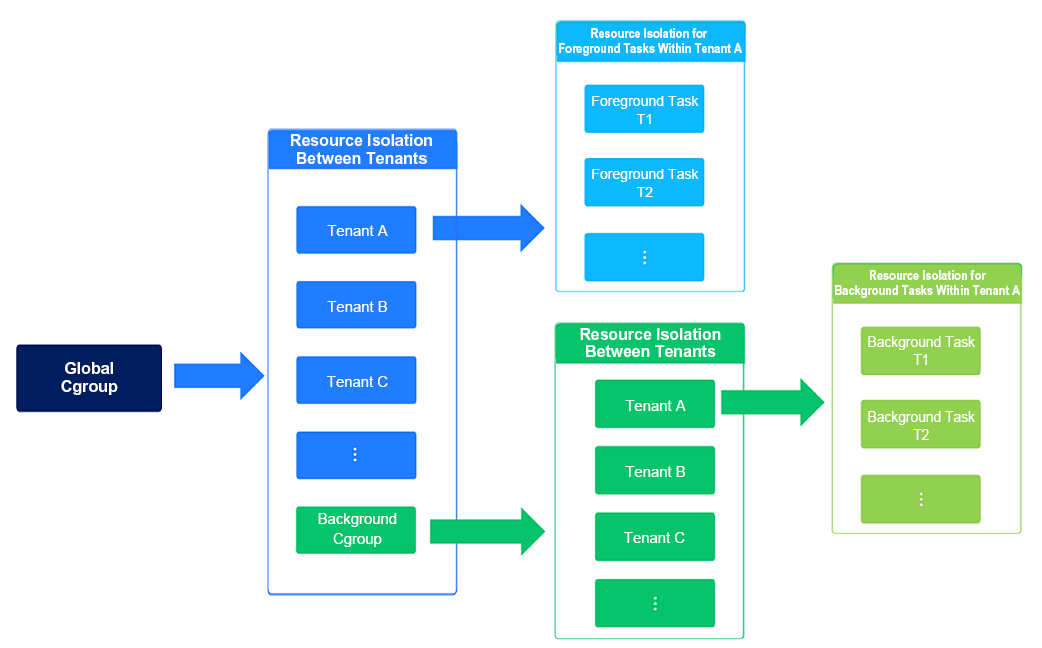
<style>
.page{position:relative;width:1042px;height:648px;background:#ffffff}
.page>*{position:absolute;margin:0}
.t1{font:13.4px/14.8px "Arial-BoldMT";color:#ffffff;scale:0.83 1}
.t2{font:14.1px/17.2px "ArialMT";color:#ffffff}
.t3{font:16px/17.7px "Arial-BoldMT";color:#ffffff}
.t4{font:14.9px "ArialMT";color:#ffffff}
.t5{font:15.9px/17.6px "Arial-BoldMT";color:#ffffff}
.t6{font:14.9px/18.2px "ArialMT";color:#ffffff;scale:0.93 1}
.t7{font:16px/18px "Arial-BoldMT";color:#ffffff}
.t8{font:14.9px/20.4px "ArialMT";color:#ffffff}
</style>
<div class="page">
<p class="t1" style="left:559px;top:28px;width:183px;height:28px;text-align:center">Resource Isolation for <br>Foreground Tasks Within Tenant A</p>
<p class="t2" style="left:592px;top:96px;width:107px;height:28px;text-align:center">Foreground Task<br>T1</p>
<p class="t3" style="left:291px;top:134px;width:141px;height:30px;text-align:center">Resource Isolation<br>Between Tenants</p>
<p class="t2" style="left:592px;top:169px;width:107px;height:28px;text-align:center">Foreground Task<br>T2</p>
<p class="t4" style="left:327px;top:225px;width:61px;height:11px">Tenant A</p>
<p class="t1" style="left:835px;top:270px;width:185px;height:28px;text-align:center">Resource Isolation for<br>Background Tasks Within Tenant A</p>
<p class="t4" style="left:327px;top:301px;width:60px;height:11px">Tenant B</p>
<p class="t5" style="left:580px;top:328px;width:141px;height:29px;text-align:center">Resource Isolation<br>Between Tenants</p>
<p class="t6" style="left:868px;top:336px;width:107px;height:29px;text-align:center">Background Task<br>T1</p>
<p class="t7" style="left:61px;top:362px;width:57px;height:33px;text-align:center">Global<br>Cgroup</p>
<p class="t4" style="left:327px;top:376px;width:61px;height:11px">Tenant C</p>
<p class="t4" style="left:625px;top:400px;width:61px;height:11px">Tenant A</p>
<p class="t6" style="left:868px;top:411px;width:107px;height:29px;text-align:center">Background Task<br>T2</p>
<p class="t4" style="left:625px;top:466px;width:60px;height:11px">Tenant B</p>
<p class="t8" style="left:318px;top:513px;width:79px;height:34px;text-align:center">Background<br>Cgroup</p>
<p class="t4" style="left:624px;top:532px;width:61px;height:11px">Tenant C</p>
</div>
